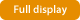
<style>
.page{position:relative;width:80px;height:20px;background:#e68d00}
.page>*{position:absolute;margin:0}
.t1{font:11px "MyriadPro-Semibold";color:#ffffff}
</style>
<div class="page">
<p class="t1" style="left:14px;top:5px;width:53px;height:11px">Full display</p>
</div>
